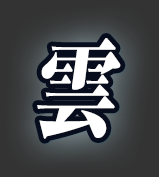
<style>
.page{position:relative;width:159px;height:177px;background:#333333}
.page>*{position:absolute;margin:0}
.t1{font:105.6px "RyuminPro-ExHeavy";letter-spacing:-0.08em;color:#ffffff;font-style:italic;scale:0.78 1}
</style>
<div class="page">
<p class="t1" style="left:37px;top:38px;width:84px;height:101px">雲</p>
</div>
